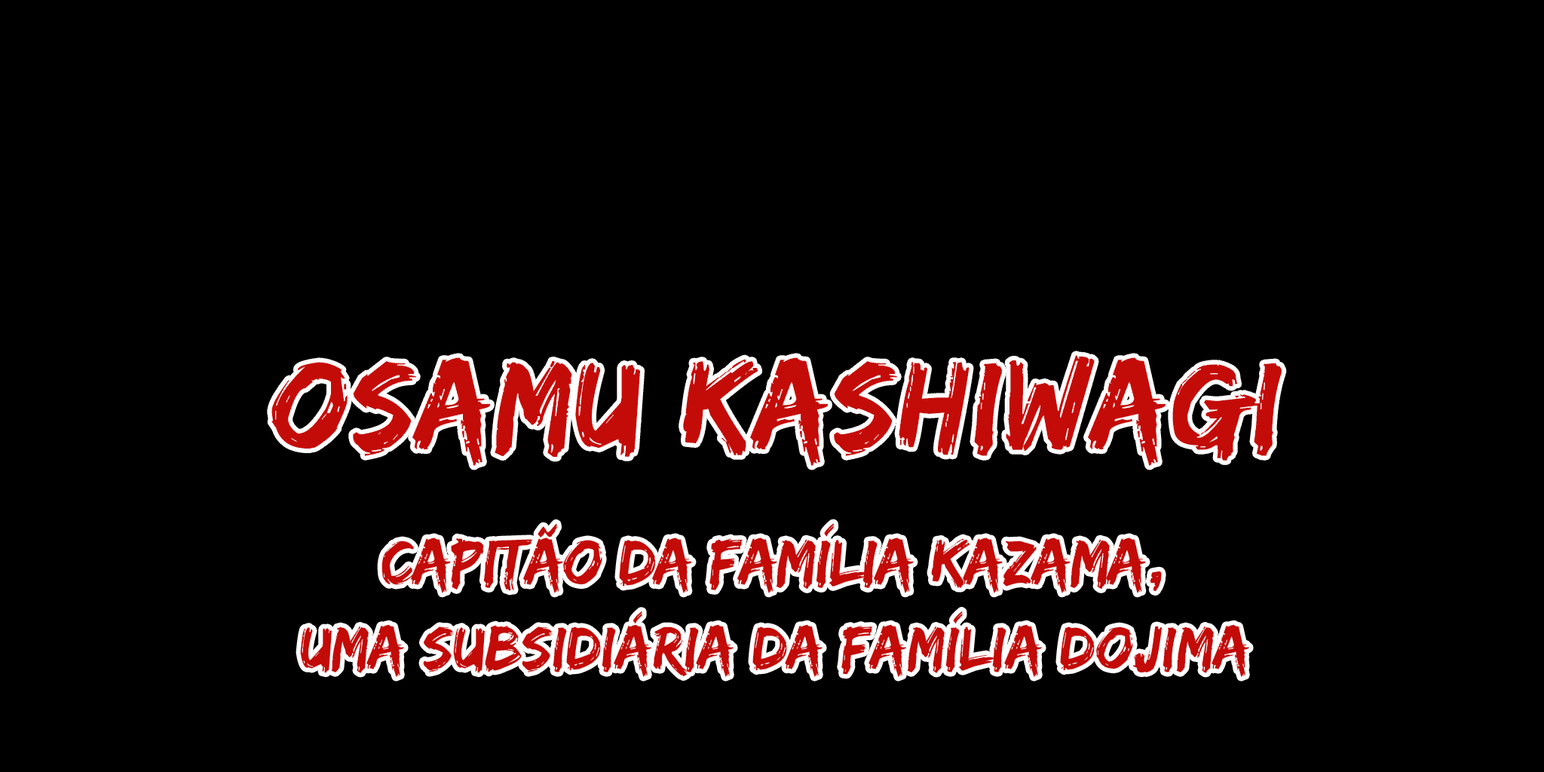
<style>
.page{position:relative;width:1544px;height:772px;background:#000000}
.page>*{position:absolute;margin:0}
.t1{font:62.6px/84.5px "EdoSZ";color:#c30b08}
.t2{font:66.4px/43px "EdoSZ";letter-spacing:-0.02em;color:#c30b08}
</style>
<div class="page">
<p class="t1" style="left:300px;top:523px;width:949px;height:154px;text-align:center"><span class="t2">Capitão da família Kazama,<br></span>uma subsidiária da família dojima</p>
</div>
